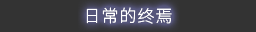
<style>
.page{position:relative;width:256px;height:32px;background:#333333}
.page>*{position:absolute;margin:0}
.t1{font:17px "NotoSansSC-Light";letter-spacing:0.06em;color:#ffffff}
</style>
<div class="page">
<p class="t1" style="left:86px;top:7px;width:86px;height:17px">日常的终焉</p>
</div>
